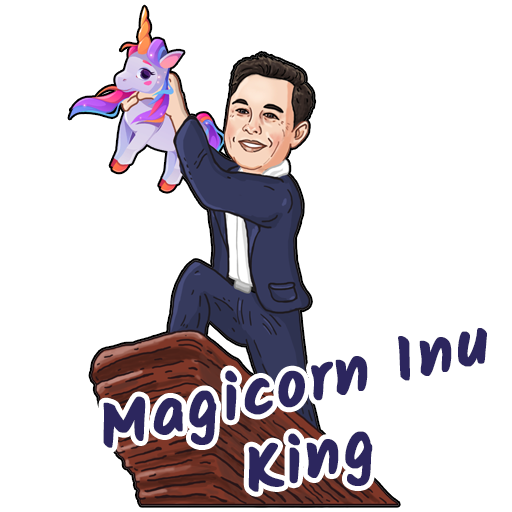
<style>
.page{position:relative;width:512px;height:512px;background:#ffffff}
.page>*{position:absolute;margin:0}
.t1{font:66.7px/75px "Kalam-Bold";letter-spacing:0.025em;color:#2c265e;font-weight:bold}
</style>
<div class="page">
<p class="t1" style="left:103px;top:328px;width:384px;height:164px;text-align:center;rotate:-13deg">Magicorn Inu<br>King</p>
</div>
